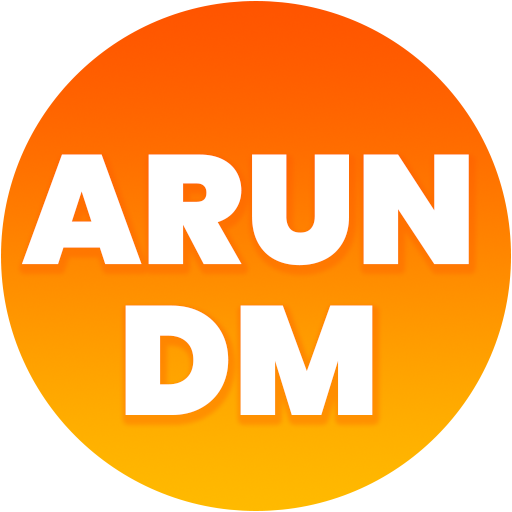
<style>
.page{position:relative;width:512px;height:512px;background:#ffffff}
.page>*{position:absolute;margin:0}
.t1{font:154.5px/151.5px "Poppins-Black";color:#ffffff}
</style>
<div class="page">
<p class="t1" style="left:22px;top:154px;width:447px;height:261px;text-align:center">ARUN<br>DM</p>
</div>
